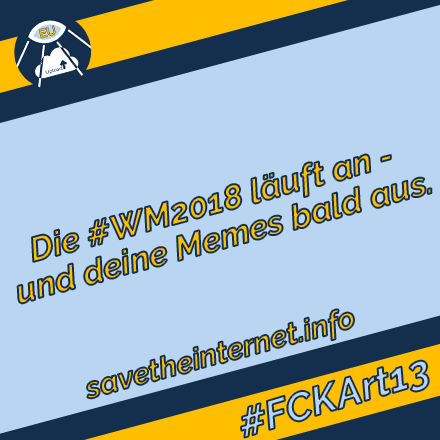
<style>
.page{position:relative;width:440px;height:440px;background:#b9d5f1}
.page>*{position:absolute;margin:0}
.t1{font:34px/36px "Raleway-BoldItalic";color:#ffbf00}
.t2{font:30px "Raleway-BoldItalic";color:#ffbf00}
.t3{font:40px "Raleway-BoldItalic";color:#b9d6f2}
</style>
<div class="page">
<p class="t1" style="left:17px;top:154px;width:415px;height:150px;text-align:center;rotate:-15deg">Die #WM2018 läuft an - <br>und deine Memes bald aus.</p>
<p class="t2" style="left:87px;top:309px;width:267px;height:90px;rotate:-15deg">savetheinternet.info</p>
<p class="t3" style="left:241px;top:360px;width:188px;height:78px;rotate:-17deg">#FCKArt13</p>
</div>
